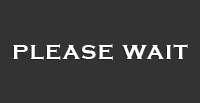
<style>
.page{position:relative;width:200px;height:103px;background:#333333}
.page>*{position:absolute;margin:0}
.t1{font:25px "CopperplateGothic-Bold";letter-spacing:0.05em;color:#ffffff}
</style>
<div class="page">
<p class="t1" style="left:13px;top:44px;width:175px;height:16px">please wait</p>
</div>
